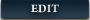
<style>
.page{position:relative;width:90px;height:20px}
.page>*{position:absolute;margin:0}
.t1{font:12px "ArnoPro-Bold";color:#f1f1f1}
</style>
<div class="page">
<p class="t1" style="left:31px;top:4px;width:28px;height:9px">EDIT</p>
</div>
